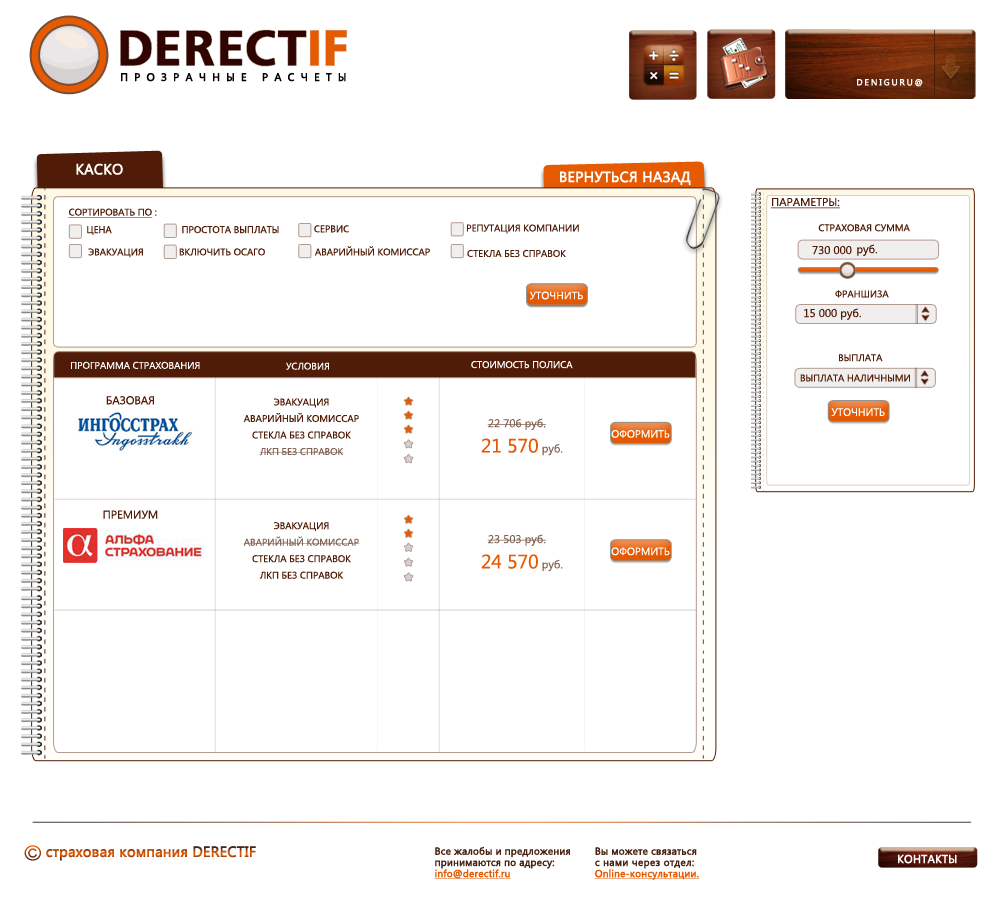
<style>
.page{position:relative;width:1000px;height:906px;background:#ffffff}
.page>*{position:absolute;margin:0}
.t1{font:10.8px "SegoeUI";letter-spacing:0.56em;color:#000000;font-weight:bold}
.t2{font:8.7px "SegoeUI";letter-spacing:0.2em;color:#ffffff;font-weight:bold}
.t3{font:14.6px "SegoeUI";letter-spacing:-0.005em;color:#ffffff;font-weight:bold}
.t4{font:11.3px "SegoeUI";color:#501c07;text-decoration:underline}
.t5{font:9.7px "SegoeUI";color:#501c07;text-decoration:underline}
.t6{font:9.7px "SegoeUI";color:#501c07}
.t7{font:11.3px "SegoeUI";color:#501c07}
.t8{font:10.6px "SegoeUI";color:#ffffff}
.t9{font:9.7px "SegoeUI";color:#ffffff}
.t10{font:9.7px/16.5px "SegoeUI";color:#501c07}
.t11{font:9.7px/16.5px "SegoeUI";color:#836354}
.t12{font:11.3px "SegoeUI";color:#836354}
.t13{font:19.4px "SegoeUI";color:#e65a02}
.t14{font:14.6px "SegoeUI";letter-spacing:-0.005em;font-weight:bold}
.t15{font:10.1px/11.2px "SegoeUI";letter-spacing:-0.005em;color:#472313;font-weight:bold}
.t16{font:10.1px/11.2px "SegoeUI";letter-spacing:-0.005em;color:#e65a02;font-weight:bold;text-decoration:underline}
.t17{font:10.1px/11.2px "SegoeUI";letter-spacing:0.01em;color:#472313;font-weight:bold}
.t18{font:11.3px "SegoeUI";color:#ffffff;font-weight:bold}
</style>
<div class="page">
<p class="t1" style="left:121px;top:73px;width:225px;height:9px">ПРОЗРАЧНЫЕ РАСЧЕТЫ</p>
<p class="t2" style="left:857px;top:79px;width:66px;height:8px">DENIGURU@</p>
<p class="t3" style="left:76px;top:163px;width:47px;height:12px">КАСКО</p>
<p class="t3" style="left:560px;top:171px;width:131px;height:14px">ВЕРНУТЬСЯ НАЗАД</p>
<p class="t4" style="left:771px;top:198px;width:69px;height:11px">ПАРАМЕТРЫ:</p>
<p class="t5" style="left:68px;top:208px;width:89px;height:10px">СОРТИРОВАТЬ ПО<span class="t6"> :</span></p>
<p class="t6" style="left:87px;top:226px;width:25px;height:9px">ЦЕНА</p>
<p class="t6" style="left:182px;top:226px;width:97px;height:8px">ПРОСТОТА ВЫПЛАТЫ</p>
<p class="t6" style="left:314px;top:225px;width:35px;height:8px">СЕРВИС</p>
<p class="t6" style="left:467px;top:224px;width:112px;height:10px">РЕПУТАЦИЯ КОМПАНИИ</p>
<p class="t6" style="left:818px;top:224px;width:92px;height:8px">СТРАХОВАЯ СУММА</p>
<p class="t6" style="left:315px;top:246px;width:115px;height:10px">АВАРИЙНЫЙ КОМИССАР</p>
<p class="t7" style="left:812px;top:246px;width:40px;height:9px">730 000</p>
<p class="t7" style="left:857px;top:244px;width:21px;height:12px">руб.</p>
<p class="t6" style="left:88px;top:248px;width:55px;height:10px">ЭВАКУАЦИЯ</p>
<p class="t6" style="left:179px;top:248px;width:86px;height:8px">ВКЛЮЧИТЬ ОСАГО</p>
<p class="t6" style="left:467px;top:249px;width:99px;height:9px">СТЕКЛА БЕЗ СПРАВОК</p>
<p class="t8" style="left:530px;top:291px;width:53px;height:9px">УТОЧНИТЬ</p>
<p class="t8" style="left:530px;top:291px;width:53px;height:9px">УТОЧНИТЬ</p>
<p class="t6" style="left:835px;top:290px;width:54px;height:8px">ФРАНШИЗА</p>
<p class="t7" style="left:804px;top:308px;width:57px;height:12px">15 000 руб.</p>
<p class="t9" style="left:71px;top:361px;width:129px;height:8px">ПРОГРАММА СТРАХОВАНИЯ</p>
<p class="t9" style="left:286px;top:362px;width:43px;height:8px">УСЛОВИЯ</p>
<p class="t9" style="left:471px;top:361px;width:102px;height:8px">СТОИМОСТЬ ПОЛИСА</p>
<p class="t6" style="left:839px;top:354px;width:44px;height:8px">ВЫПЛАТА</p>
<p class="t6" style="left:800px;top:374px;width:110px;height:8px">ВЫПЛАТА НАЛИЧНЫМИ</p>
<p class="t7" style="left:106px;top:396px;width:48px;height:9px">БАЗОВАЯ</p>
<p class="t10" style="left:243px;top:398px;width:116px;height:58px;text-align:center">ЭВАКУАЦИЯ<br>АВАРИЙНЫЙ КОМИССАР<br>СТЕКЛА БЕЗ СПРАВОК<br><span class="t11">ЛКП БЕЗ СПРАВОК</span></p>
<p class="t8" style="left:831px;top:408px;width:54px;height:8px">УТОЧНИТЬ</p>
<p class="t12" style="left:487px;top:418px;width:59px;height:12px">22 706 руб.</p>
<p class="t13" style="left:481px;top:438px;width:82px;height:18px">21 570<span class="t12"> руб.</span></p>
<p class="t8" style="left:611px;top:430px;width:59px;height:8px">ОФОРМИТЬ</p>
<p class="t7" style="left:103px;top:510px;width:55px;height:9px">ПРЕМИУМ</p>
<p class="t10" style="left:243px;top:522px;width:117px;height:57px;text-align:center">ЭВАКУАЦИЯ<br><span class="t11">АВАРИЙНЫЙ КОМИССАР<br></span>СТЕКЛА БЕЗ СПРАВОК<br>ЛКП БЕЗ СПРАВОК</p>
<p class="t12" style="left:487px;top:534px;width:59px;height:12px">23 503 руб.</p>
<p class="t13" style="left:481px;top:554px;width:82px;height:18px">24 570<span class="t12"> руб.</span></p>
<p class="t8" style="left:611px;top:547px;width:59px;height:9px">ОФОРМИТЬ</p>
<p class="t14" style="left:46px;top:846px;width:210px;height:15px">страховая компания DERECTIF</p>
<p class="t15" style="left:434px;top:846px;width:136px;height:33px">Все жалобы и предложения<br>принимаются по адресу:<br><span class="t16">info@derectif.ru</span></p>
<p class="t16" style="left:594px;top:847px;width:106px;height:33px"><span class="t15">Вы можете связаться<br></span><span class="t17">с нами через отдел:<br></span>Online-консультации.</p>
<p class="t18" style="left:898px;top:854px;width:59px;height:10px">КОНТАКТЫ</p>
</div>
